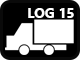
<style>
.page{position:relative;width:80px;height:60px;background:#000000}
.page>*{position:absolute;margin:0}
.t1{font:14px "SegoeUI-Bold";color:#ffffff}
</style>
<div class="page">
<p class="t1" style="left:28px;top:8px;width:46px;height:10px">LOG 15</p>
</div>
